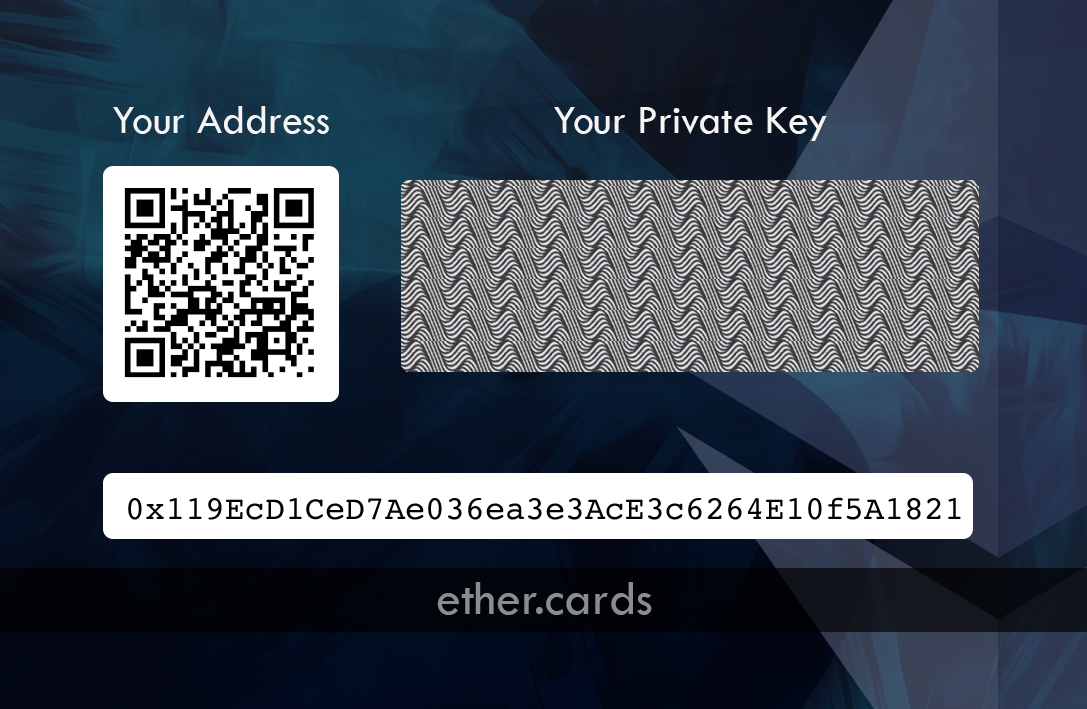
<style>
.page{position:relative;width:1087px;height:709px}
.page>*{position:absolute;margin:0}
.t1{font:41.7px "TwCenMT-Regular";color:#f5f5f5}
.t2{font:50px "TwCenMT-Regular";color:#8c8d8e}
</style>
<div class="page">
<p class="t1" style="left:113px;top:106px;width:216px;height:28px">Your Address</p>
<p class="t1" style="left:554px;top:107px;width:273px;height:34px">Your Private Key</p>
<p class="t2" style="left:437px;top:582px;width:215px;height:33px">ether.cards</p>
</div>
